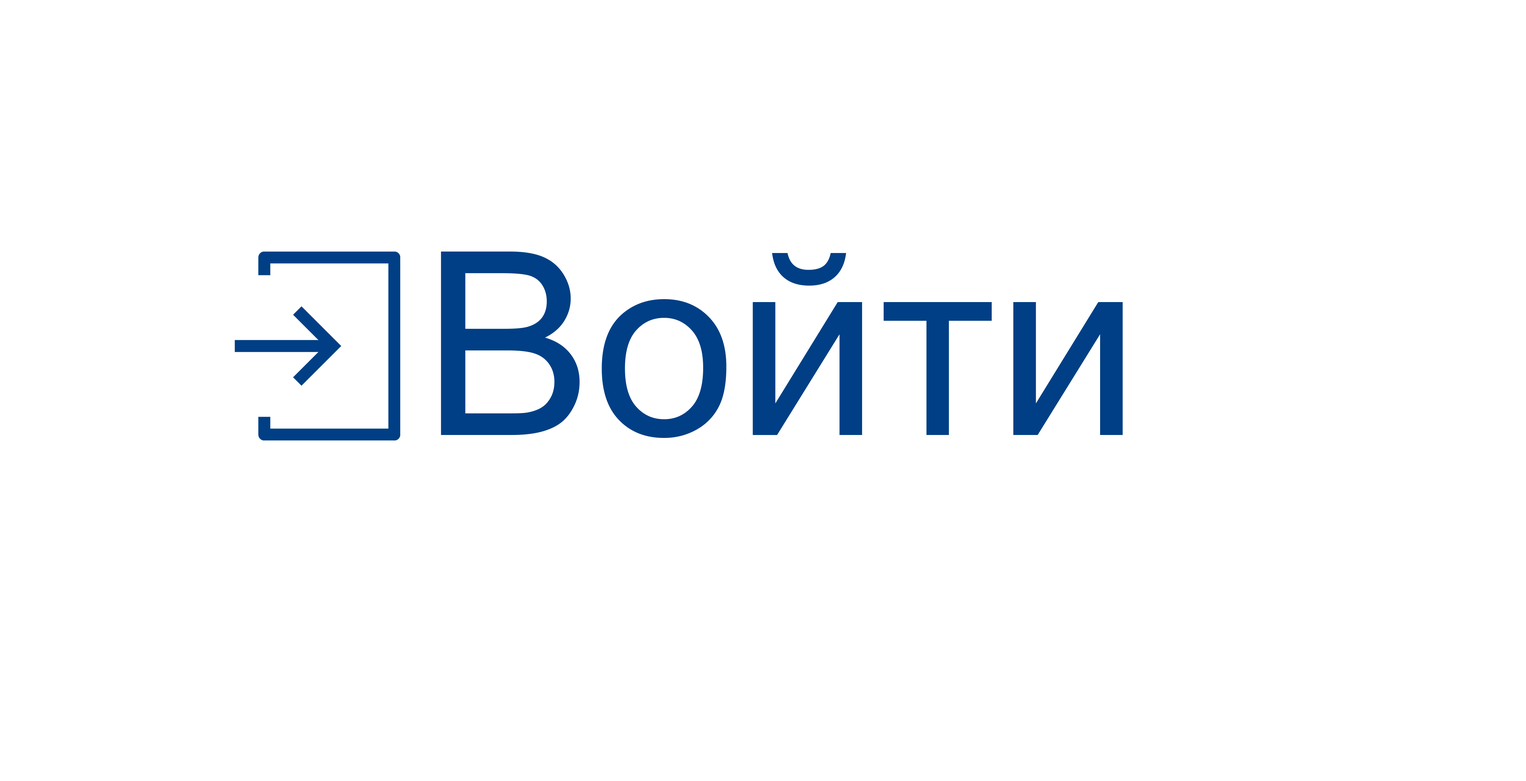
<style>
.page{position:relative;width:1526px;height:781px;background:#ffffff}
.page>*{position:absolute;margin:0}
.t1{font:256.4px "ArialMT";color:#003f85}
</style>
<div class="page">
<p class="t1" style="left:441px;top:252px;width:682px;height:186px">Войти</p>
</div>
